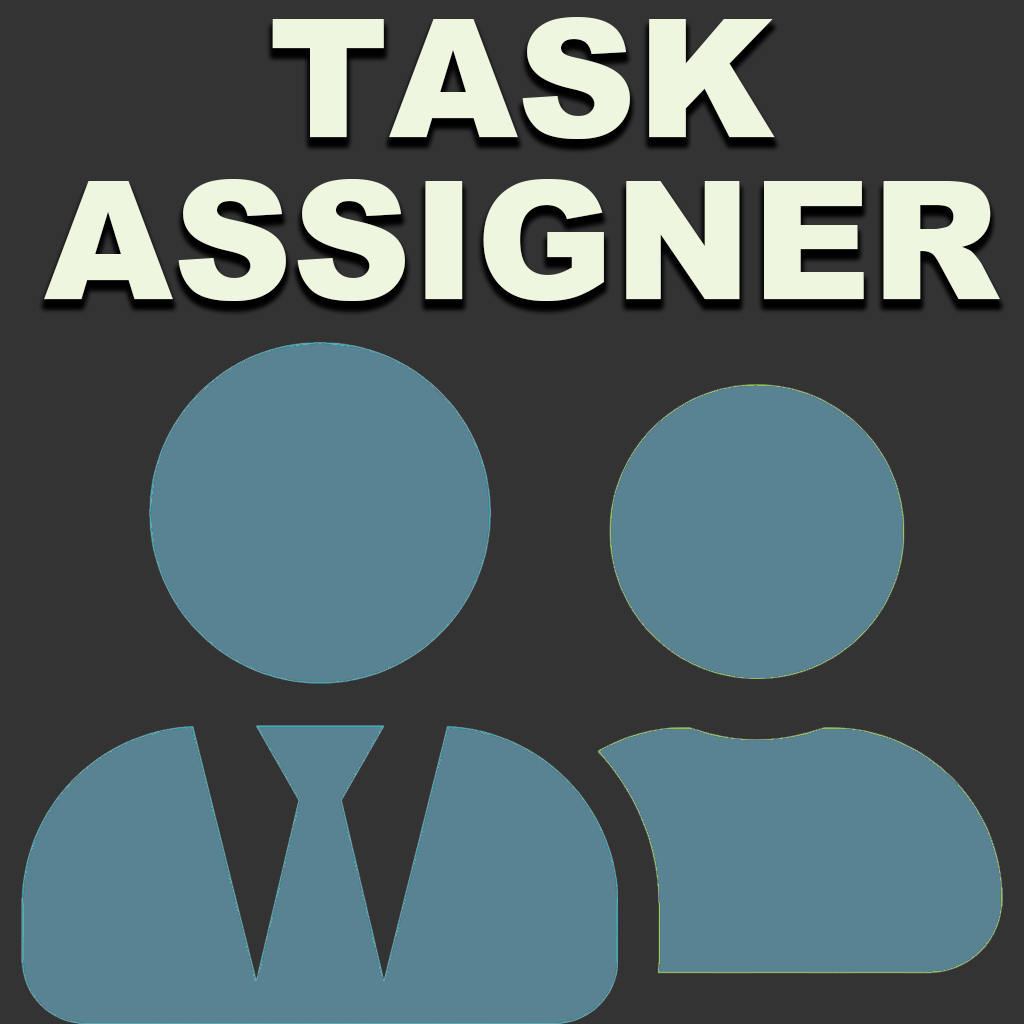
<style>
.page{position:relative;width:1024px;height:1024px;background:#333333}
.page>*{position:absolute;margin:0}
.t1{font:165.5px/162px "Arial-Black";color:#eff6e0}
</style>
<div class="page">
<p class="t1" style="left:44px;top:17px;width:956px;height:284px;text-align:center">TASK<br>ASSIGNER</p>
</div>
